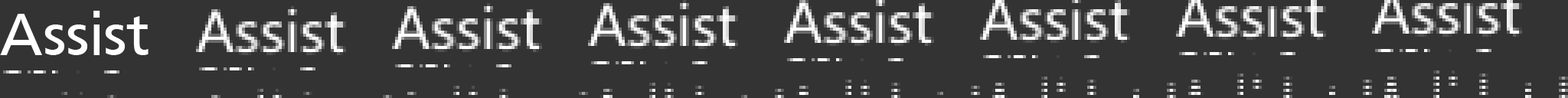
<style>
.page{position:relative;width:1568px;height:98px;background:#333333}
.page>*{position:absolute;margin:0}
.t1{font:62.1px "Frutiger";color:#ffffff}
</style>
<div class="page">
<p class="t1" style="left:0px;top:11px;width:149px;height:44px">Assist</p>
</div>
